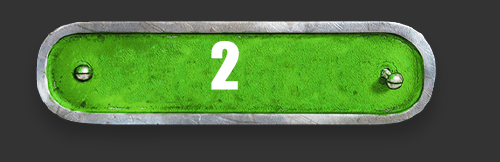
<style>
.page{position:relative;width:500px;height:162px;background:#333333}
.page>*{position:absolute;margin:0}
.t1{font:60px "Impact";color:#ffffff}
</style>
<div class="page">
<p class="t1" style="left:211px;top:41px;width:28px;height:49px">2</p>
</div>
